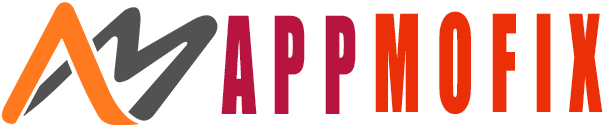
<style>
.page{position:relative;width:611px;height:127px;background:#ffffff}
.page>*{position:absolute;margin:0}
.t1{font:124.2px "Impact";letter-spacing:0.25em;color:#b71540;text-transform:uppercase;scale:0.54 1}
.t2{font:124.2px "Impact";letter-spacing:0.25em;color:#eb2f06;text-transform:uppercase;scale:0.54 1}
</style>
<div class="page">
<p class="t1" style="left:221px;top:15px;width:135px;height:99px">App</p>
<p class="t2" style="left:375px;top:11px;width:228px;height:103px">MOFIX</p>
</div>
